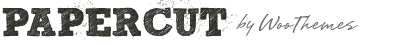
<style>
.page{position:relative;width:399px;height:45px;background:#ffffff}
.page>*{position:absolute;margin:0}
.t1{font:39.6px "SketchRockwell";letter-spacing:-0.025em;color:#282620}
.t2{font:25.6px "Brisa";letter-spacing:0.01em;color:#707070}
</style>
<div class="page">
<p class="t1" style="left:2px;top:7px;width:225px;height:30px">PAPERCUT</p>
<p class="t2" style="left:236px;top:14px;width:122px;height:22px">by WooThemes</p>
</div>
